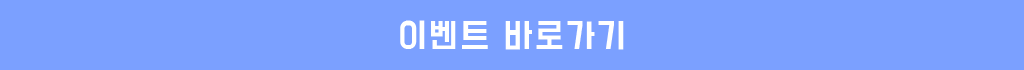
<style>
.page{position:relative;width:1024px;height:70px;background:#7ba0ff}
.page>*{position:absolute;margin:0}
.t1{font:30px "BMDoHyeon";letter-spacing:0.08em;color:#ffffff}
</style>
<div class="page">
<p class="t1" style="left:400px;top:20px;width:224px;height:30px">이벤트 바로가기</p>
</div>
